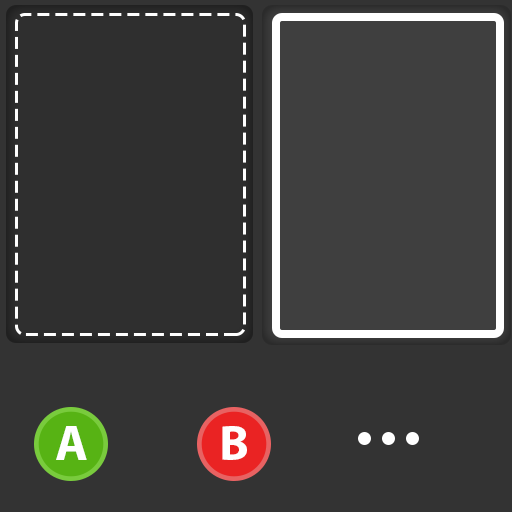
<style>
.page{position:relative;width:512px;height:512px;background:#333333}
.page>*{position:absolute;margin:0}
.t1{font:50px "MyriadPro-Bold";color:#ffffff}
</style>
<div class="page">
<p class="t1" style="left:56px;top:426px;width:31px;height:34px">A</p>
<p class="t1" style="left:222px;top:426px;width:25px;height:34px">B</p>
</div>
